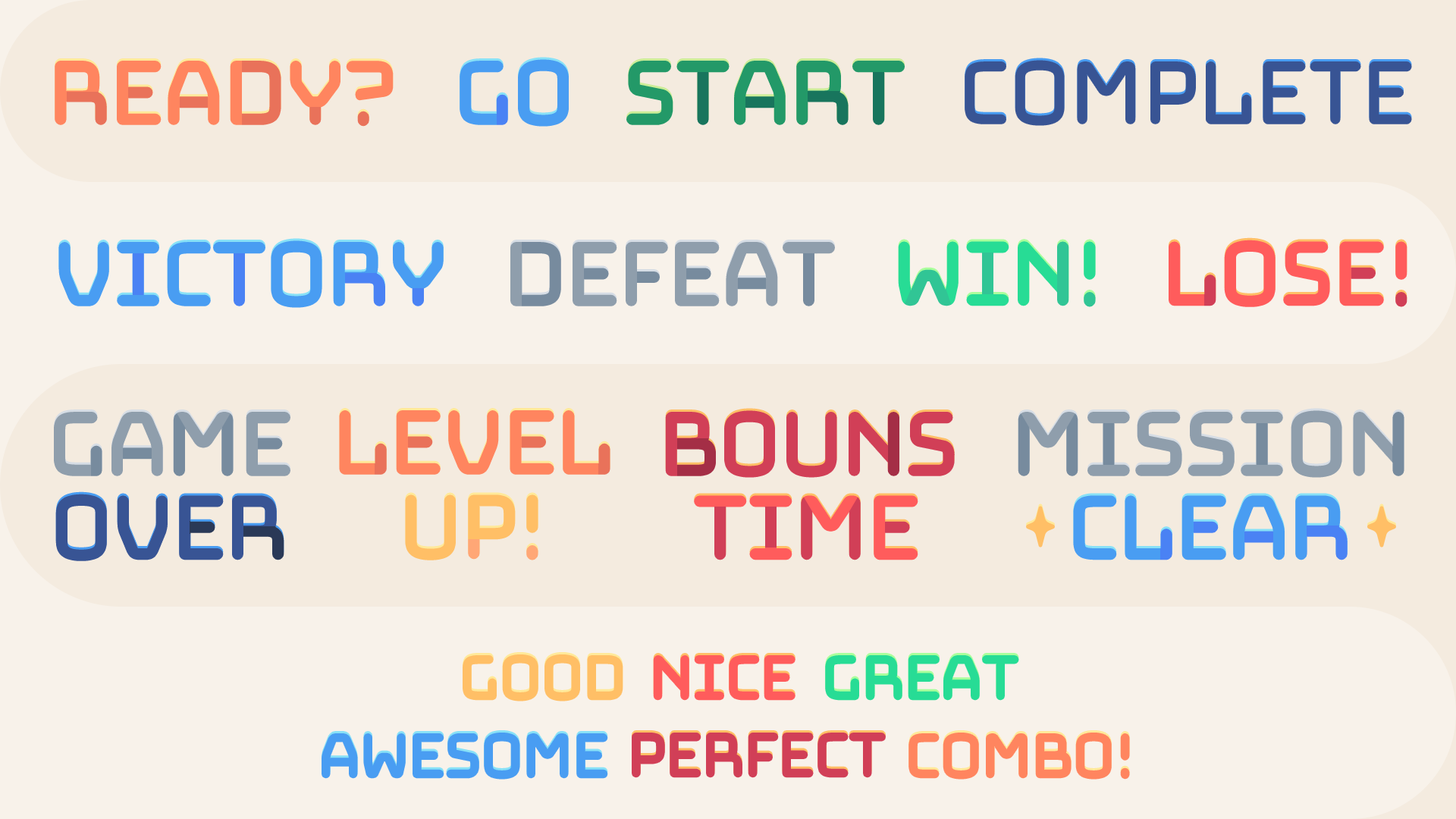
<style>
.page{position:relative;width:1456px;height:819px;background:#f4ebdf}
.page>*{position:absolute;margin:0}
.t1{font:99.7px "Bungee-Hairline";letter-spacing:-0.15em;color:#ff855f;text-transform:uppercase;font-weight:bold}
.t2{font:99.7px "Bungee-Hairline";letter-spacing:-0.15em;color:#499df2;text-transform:uppercase;font-weight:bold}
.t3{font:99.7px "Bungee-Hairline";letter-spacing:-0.15em;color:#239968;text-transform:uppercase;font-weight:bold}
.t4{font:99.7px "Bungee-Hairline";letter-spacing:-0.15em;color:#385494;text-transform:uppercase;font-weight:bold}
.t5{font:99.7px "Bungee-Hairline";letter-spacing:-0.15em;color:#989898;text-transform:uppercase;font-weight:bold}
.t6{font:99.7px "Bungee-Hairline";letter-spacing:-0.15em;text-transform:uppercase;font-weight:bold}
.t7{font:99.7px "Bungee-Hairline";letter-spacing:-0.15em;color:#ff5c5c;text-transform:uppercase;font-weight:bold}
.t8{font:99.7px "Bungee-Hairline";letter-spacing:-0.15em;color:#d13f57;text-transform:uppercase;font-weight:bold}
.t9{font:99.7px "Bungee-Hairline";letter-spacing:-0.15em;color:#ffbf66;text-transform:uppercase;font-weight:bold}
.t10{font:68.2px "Bungee-Hairline";letter-spacing:-0.15em;color:#ffbf66;text-transform:uppercase;font-weight:bold}
.t11{font:68.2px "Bungee-Hairline";letter-spacing:-0.15em;color:#ff5c5c;text-transform:uppercase;font-weight:bold}
.t12{font:68.2px "Bungee-Hairline";letter-spacing:-0.15em;color:#27dc95;text-transform:uppercase;font-weight:bold}
.t13{font:68.2px "Bungee-Hairline";letter-spacing:-0.15em;color:#499df2;text-transform:uppercase;font-weight:bold}
.t14{font:68.2px "Bungee-Hairline";letter-spacing:-0.15em;color:#d13f57;text-transform:uppercase;font-weight:bold}
.t15{font:68.2px "Bungee-Hairline";letter-spacing:-0.15em;color:#ff855f;text-transform:uppercase;font-weight:bold}
</style>
<div class="page">
<p class="t1" style="left:58px;top:64px;width:332px;height:59px">Ready?</p>
<p class="t2" style="left:463px;top:63px;width:102px;height:60px">Go</p>
<p class="t3" style="left:630px;top:64px;width:271px;height:57px">Start</p>
<p class="t4" style="left:968px;top:63px;width:441px;height:60px">Complete</p>
<p class="t2" style="left:62px;top:244px;width:378px;height:60px">VICTORY</p>
<p class="t5" style="left:514px;top:246px;width:317px;height:57px">Defeat</p>
<p class="t6" style="left:902px;top:245px;width:190px;height:58px">win!</p>
<p class="t7" style="left:1172px;top:243px;width:232px;height:60px">Lose!</p>
<p class="t5" style="left:58px;top:416px;width:229px;height:56px">GAME</p>
<p class="t1" style="left:343px;top:414px;width:264px;height:57px">Level</p>
<p class="t8" style="left:669px;top:414px;width:282px;height:60px">Bouns</p>
<p class="t5" style="left:1021px;top:414px;width:380px;height:60px">Mission</p>
<p class="t4" style="left:59px;top:497px;width:222px;height:60px">OVER</p>
<p class="t9" style="left:409px;top:498px;width:126px;height:59px">Up!</p>
<p class="t6" style="left:698px;top:499px;width:217px;height:58px">Time</p>
<p class="t2" style="left:1077px;top:499px;width:267px;height:58px">Clear</p>
<p class="t10" style="left:466px;top:657px;width:154px;height:41px">Good</p>
<p class="t11" style="left:656px;top:658px;width:136px;height:40px">Nice</p>
<p class="t12" style="left:828px;top:658px;width:188px;height:40px">Great</p>
<p class="t13" style="left:325px;top:736px;width:280px;height:41px">awesome</p>
<p class="t14" style="left:635px;top:736px;width:248px;height:39px">Perfect</p>
<p class="t15" style="left:912px;top:736px;width:215px;height:41px">Combo!</p>
</div>
